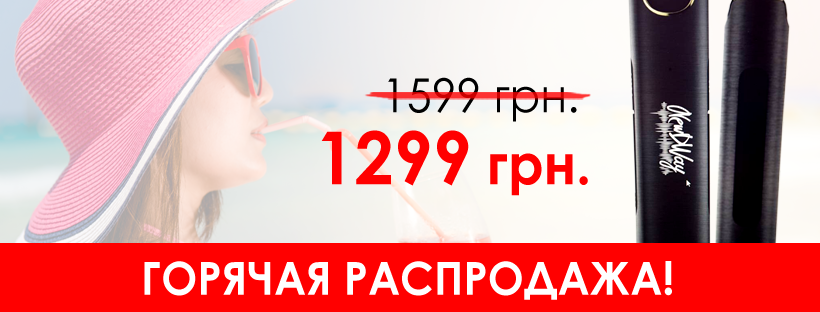
<style>
.page{position:relative;width:820px;height:312px;background:#ff0000}
.page>*{position:absolute;margin:0}
.t1{font:47.1px "CenturyGothic";color:#000000;text-transform:uppercase;scale:0.95 1}
.t2{font:47.1px "CenturyGothic";color:#000000;scale:0.95 1}
.t3{font:73.3px "CenturyGothic-Bold";color:#ff0000;text-transform:uppercase;scale:0.95 1}
.t4{font:56.5px "CenturyGothic-Bold";color:#ff0000;scale:0.95 1}
.t5{font:56.5px "CenturyGothic-Bold";color:#ff0000;text-transform:uppercase;scale:0.95 1}
.t6{font:45.6px "CenturyGothic-Bold";color:#ffffff;text-transform:uppercase;scale:0.95 1}
</style>
<div class="page">
<p class="t1" style="left:388px;top:77px;width:189px;height:45px">1599 <span class="t2">грн.</span></p>
<p class="t3" style="left:321px;top:130px;width:267px;height:66px">1299 <span class="t4">грн</span><span class="t5">.</span></p>
<p class="t6" style="left:144px;top:261px;width:528px;height:39px">ГОРЯЧАЯ РАСПРОДАЖА!</p>
</div>
